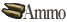
<style>
.page{position:relative;width:67px;height:22px;background:#ffffff}
.page>*{position:absolute;margin:0}
.t1{font:20px "RyuminPro-ExBold";letter-spacing:-0.12em;color:#4c4741;scale:0.8 1}
</style>
<div class="page">
<p class="t1" style="left:23px;top:4px;width:43px;height:16px">Ammo</p>
</div>
